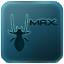
<style>
.page{position:relative;width:64px;height:64px}
.page>*{position:absolute;margin:0}
.t1{font:7px "VenusRising-Regular";color:#04161d;text-transform:uppercase;font-weight:bold}
</style>
<div class="page">
<p class="t1" style="left:29px;top:19px;width:30px;height:7px">max.</p>
</div>
